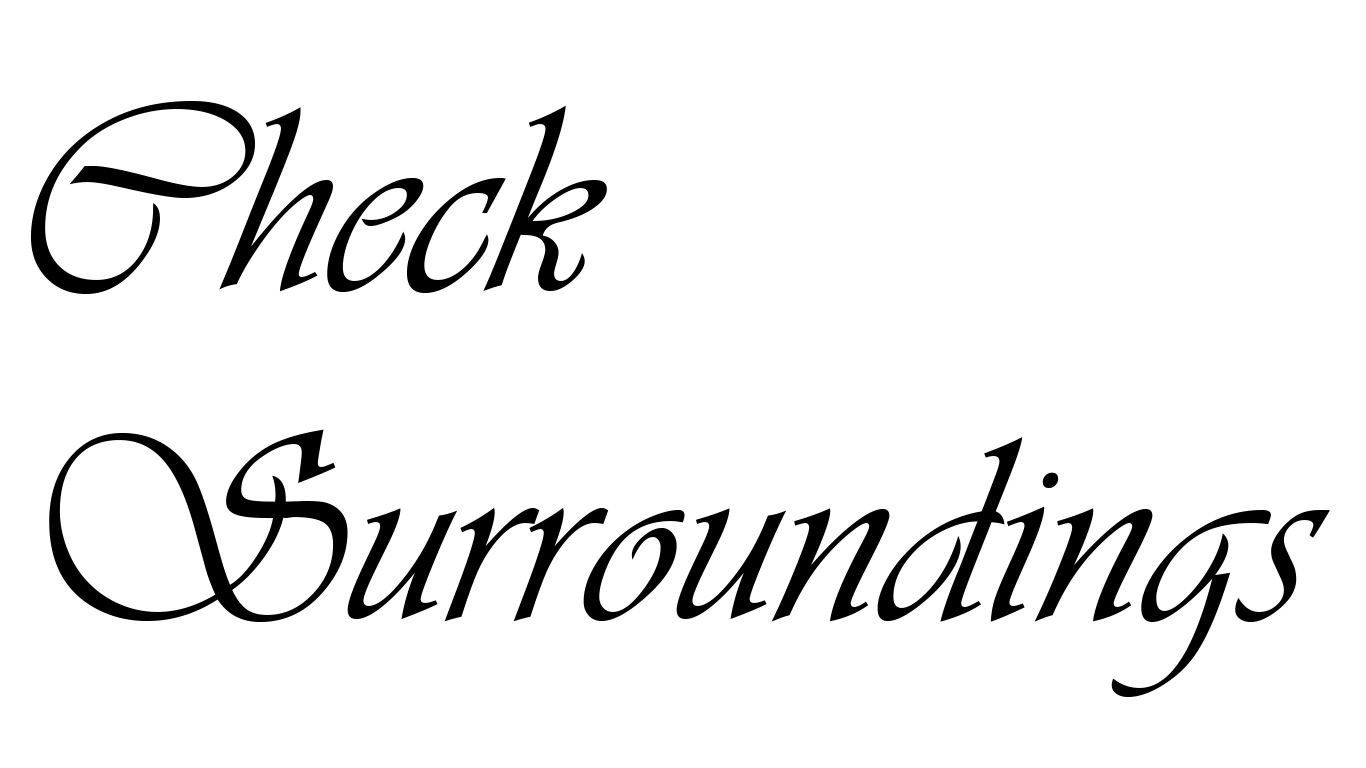
<style>
.page{position:relative;width:1366px;height:768px;background:#ffffff}
.page>*{position:absolute;margin:0}
.t1{font:275px "Vivaldii";color:#000000}
</style>
<div class="page">
<p class="t1" style="left:30px;top:101px;width:1300px;height:596px">Check <br>Surroundings</p>
</div>
